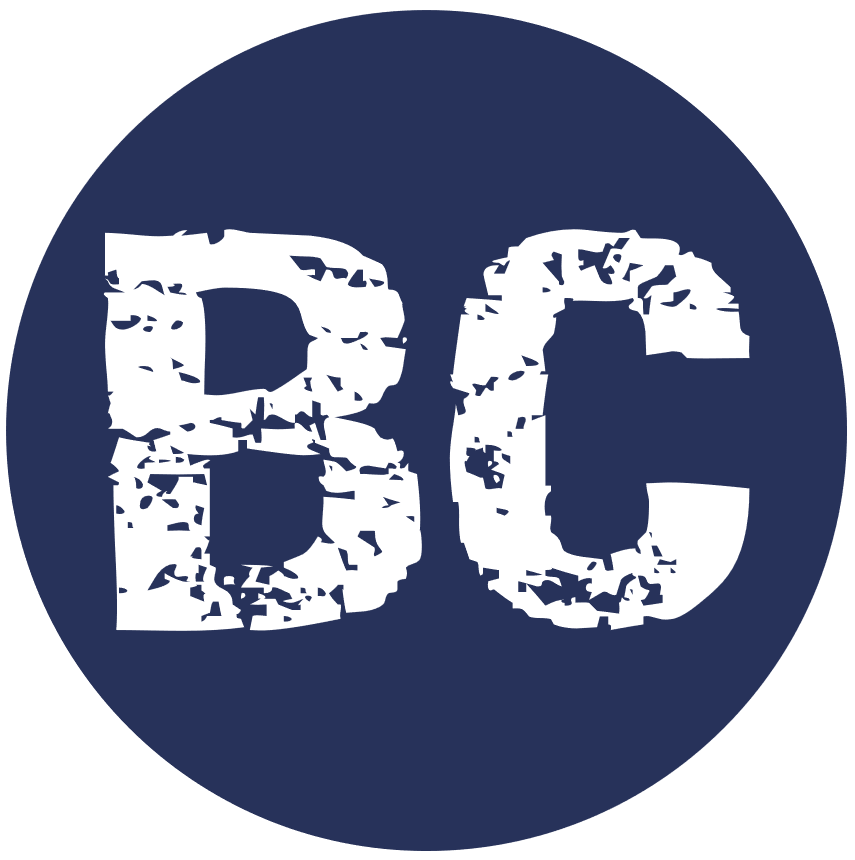
<style>
.page{position:relative;width:855px;height:860px;background:#27325a}
.page>*{position:absolute;margin:0}
.t1{font:400px "Destroy";color:#ffffff}
</style>
<div class="page">
<p class="t1" style="left:103px;top:229px;width:647px;height:403px">BC</p>
</div>
